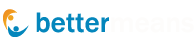
<style>
.page{position:relative;width:194px;height:48px;background:#ffffff}
.page>*{position:absolute;margin:0}
.t1{font:29px "FranklinGothic-Medium";color:#0486bc}
.t2{font:29px "FranklinGothic-Medium";color:#fdfcfb}
</style>
<div class="page">
<p class="t1" style="left:36px;top:12px;width:158px;height:21px">better<span class="t2">means</span></p>
</div>
